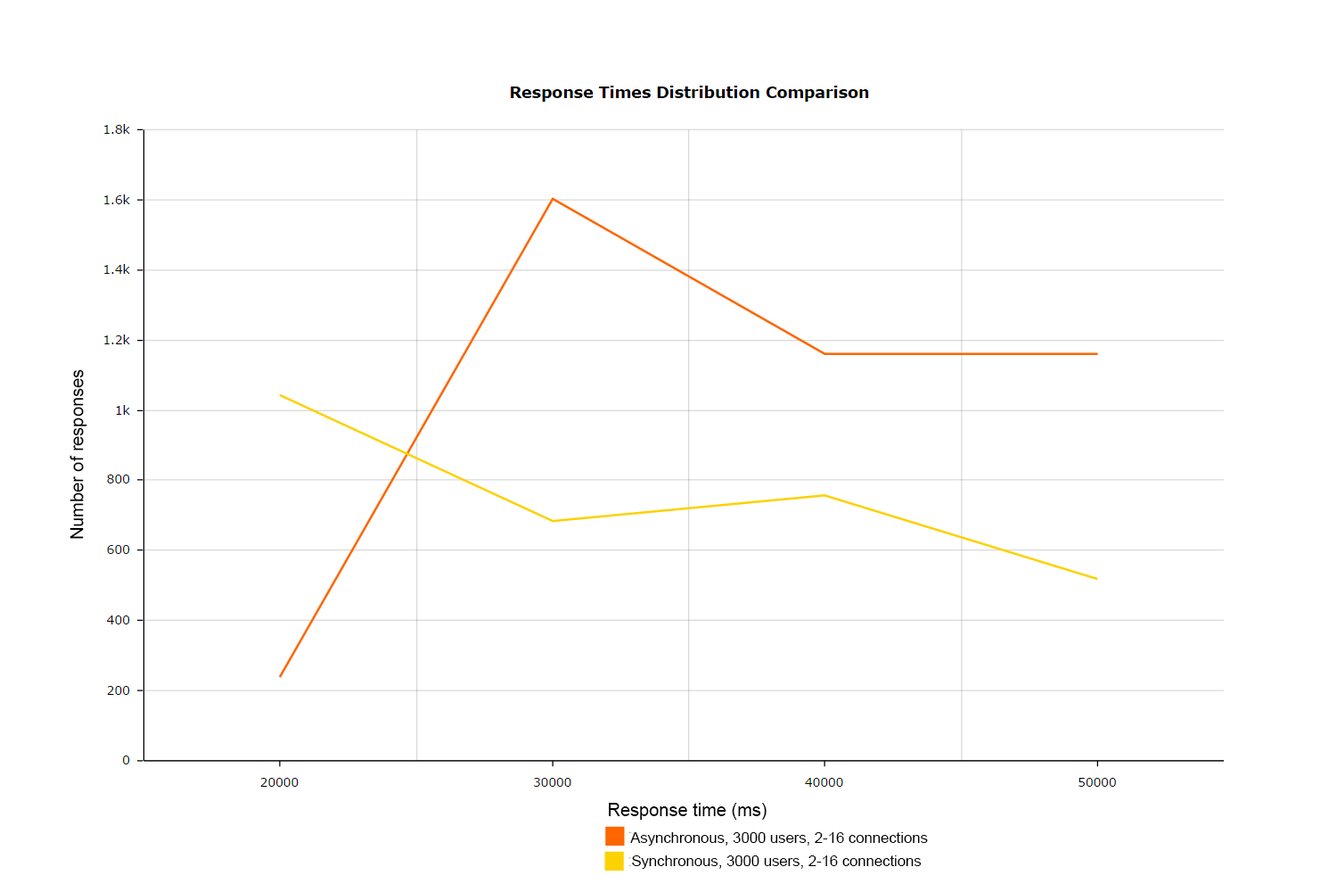
<style>
.page{position:relative;width:1337px;height:892px;background:#ffffff}
.page>*{position:absolute;margin:0}
.t1{font:10.7px "ArialMT";color:#000000}
.t2{font:17.8px "ArialMT";color:#000000}
.t3{font:14.9px "ArialMT";color:#000000}
</style>
<div class="page">
<p class="t1" style="left:70px;top:369px;width:17px;height:170px;rotate:-90deg">Number of responses</p>
<p class="t2" style="left:609px;top:802px;width:158px;height:17px">Response time (ms)</p>
<p class="t3" style="left:630px;top:832px;width:298px;height:13px">Asynchronous, 3000 users, 2-16 connections</p>
<p class="t3" style="left:632px;top:855px;width:290px;height:13px">Synchronous, 3000 users, 2-16 connections</p>
</div>
